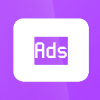
<style>
.page{position:relative;width:100px;height:100px;background:#ffffff}
.page>*{position:absolute;margin:0}
.t1{font:18px "Cinema-Gothic-NBP";color:#ffffff}
</style>
<div class="page">
<p class="t1" style="left:35px;top:42px;width:32px;height:16px">Ads</p>
</div>
